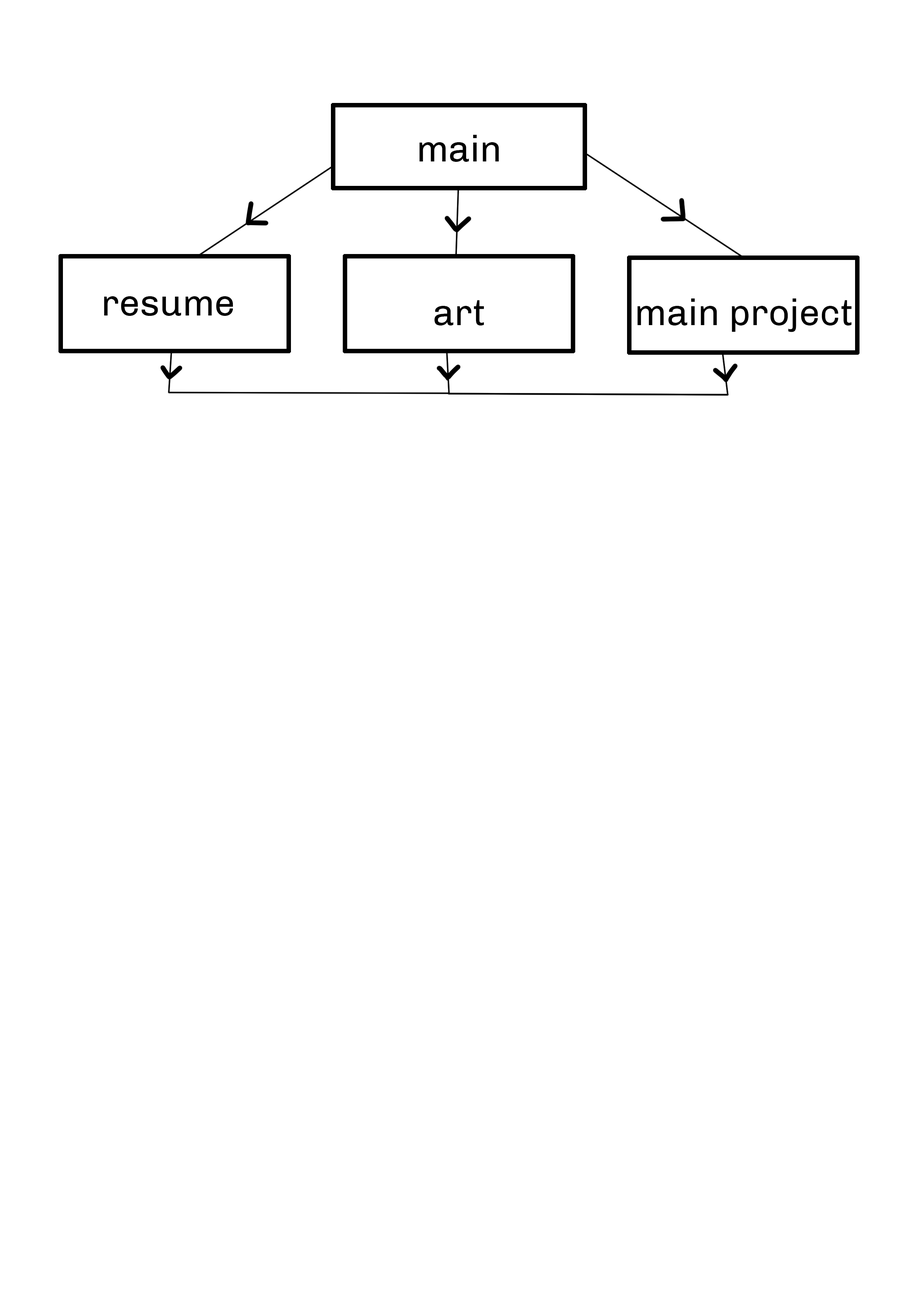
<style>
.page{position:relative;width:918px;height:1299px;background:#ffffff}
.page>*{position:absolute;margin:0}
.t1{font:37px "Chivo-Regular";color:#000000}
</style>
<div class="page">
<p class="t1" style="left:419px;top:135px;width:80px;height:27px">main</p>
<p class="t1" style="left:104px;top:296px;width:129px;height:20px">resume</p>
<p class="t1" style="left:434px;top:300px;width:50px;height:25px">art</p>
<p class="t1" style="left:638px;top:298px;width:214px;height:34px">main project</p>
</div>
